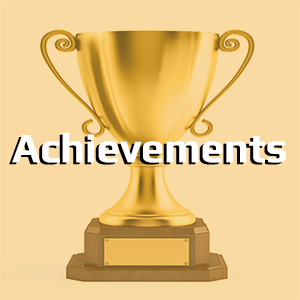
<style>
.page{position:relative;width:300px;height:300px;background:#f9daa2}
.page>*{position:absolute;margin:0}
.t1{font:41.7px "Play-Bold";color:#ffffff}
</style>
<div class="page">
<p class="t1" style="left:12px;top:132px;width:274px;height:31px">Achievements</p>
</div>
